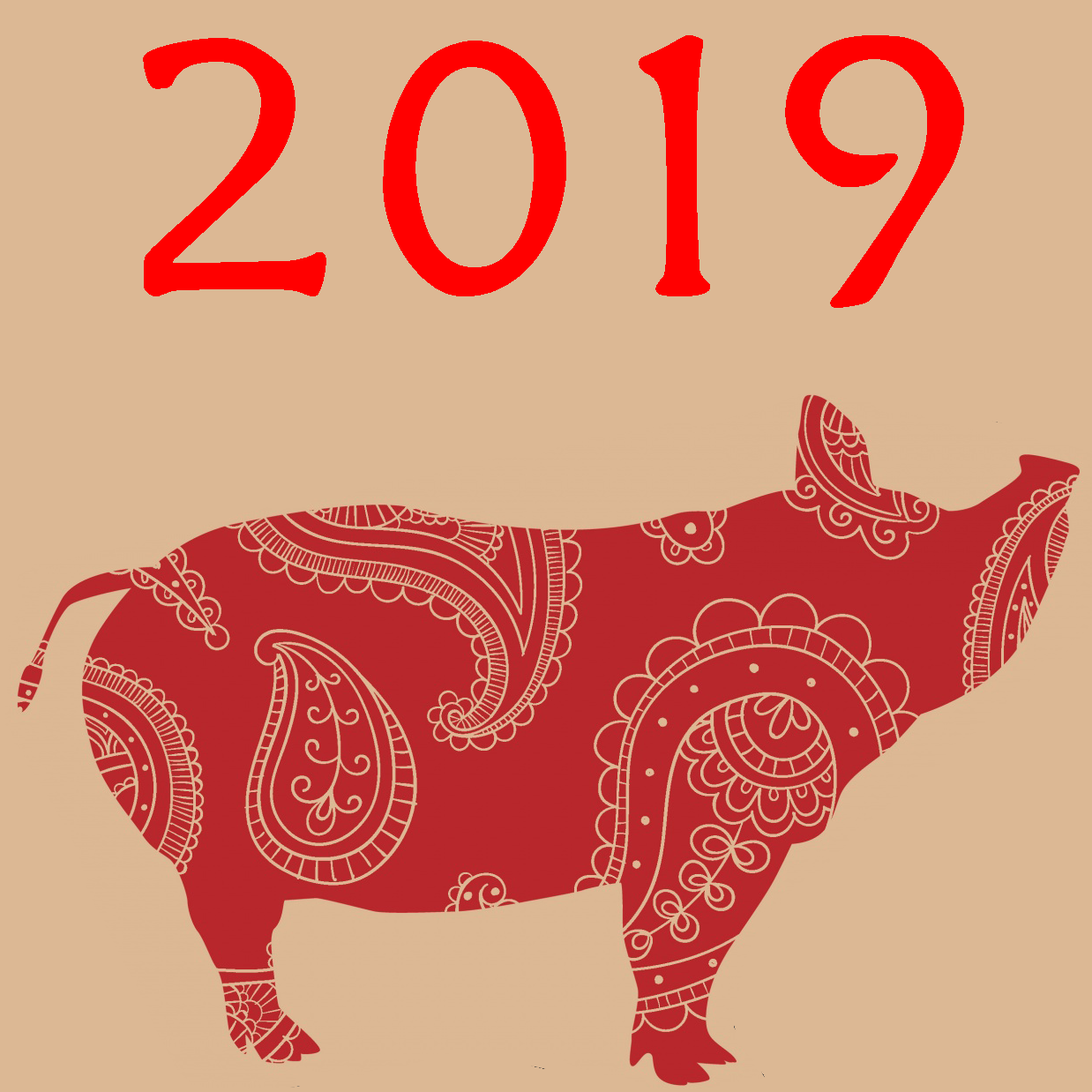
<style>
.page{position:relative;width:1092px;height:1092px;background:#dcb894}
.page>*{position:absolute;margin:0}
.t1{font:441px "Herculanum";color:#ff0000}
</style>
<div class="page">
<p class="t1" style="left:143px;top:35px;width:821px;height:273px">2019</p>
</div>
